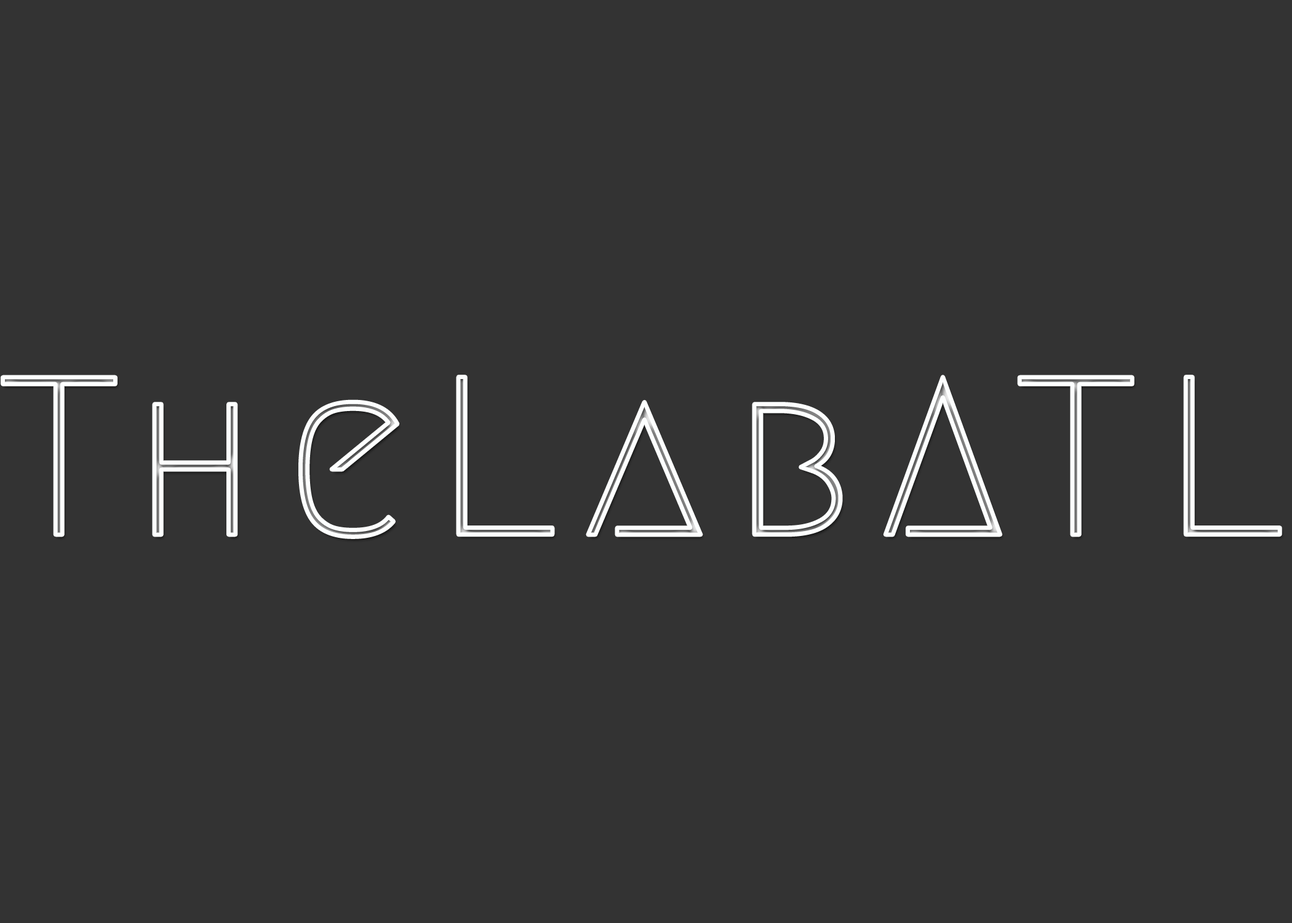
<style>
.page{position:relative;width:1292px;height:923px;background:#333333}
.page>*{position:absolute;margin:0}
.t1{font:224.9px "Megrim";letter-spacing:0.125em}
</style>
<div class="page">
<p class="t1" style="left:2px;top:377px;width:1278px;height:160px">TheLabATL</p>
</div>
